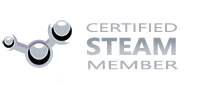
<style>
.page{position:relative;width:210px;height:90px;background:#ffffff}
.page>*{position:absolute;margin:0}
.t1{font:12px "NirmalaUI";color:#acb2b8;scale:1.72 1}
.t2{font:24px "NirmalaUI-Bold";color:#acb2b8;scale:1.15 1}
.t3{font:12px "NirmalaUI";color:#acb2b8;scale:1.92 1}
</style>
<div class="page">
<p class="t1" style="left:86px;top:23px;width:91px;height:9px">CERTIFIED</p>
<p class="t2" style="left:86px;top:37px;width:90px;height:19px">STEAM</p>
<p class="t3" style="left:88px;top:60px;width:90px;height:10px">MEMBER</p>
</div>
